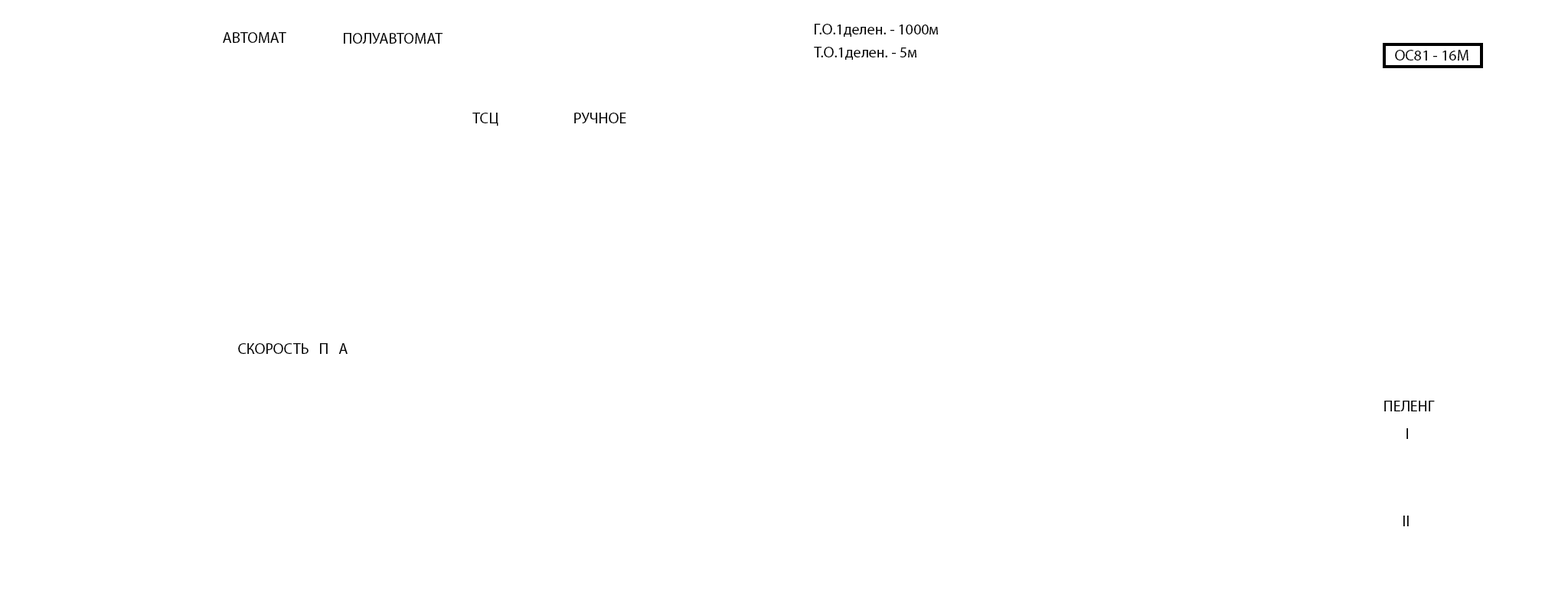
<style>
.page{position:relative;width:1568px;height:596px;background:#ffffff}
.page>*{position:absolute;margin:0}
.t1{font:15.3px "MyriadPro-Regular";color:#000000}
</style>
<div class="page">
<p class="t1" style="left:815px;top:24px;width:123px;height:13px">Г.О.1делен. - 1000м</p>
<p class="t1" style="left:223px;top:32px;width:63px;height:11px">АВТОМАТ</p>
<p class="t1" style="left:344px;top:33px;width:99px;height:11px">ПОЛУАВТОМАТ</p>
<p class="t1" style="left:814px;top:47px;width:102px;height:13px">Т.О.1делен. - 5м</p>
<p class="t1" style="left:1395px;top:50px;width:73px;height:10px">ОС81 - 16М</p>
<p class="t1" style="left:472px;top:113px;width:26px;height:13px">ТСЦ</p>
<p class="t1" style="left:574px;top:113px;width:52px;height:10px">РУЧНОЕ</p>
<p class="t1" style="left:238px;top:343px;width:110px;height:11px">СКОРОСТЬ   П   А</p>
<p class="t1" style="left:1384px;top:400px;width:51px;height:11px">ПЕЛЕНГ</p>
<p class="t1" style="left:1406px;top:428px;width:2px;height:11px">I</p>
<p class="t1" style="left:1403px;top:515px;width:6px;height:11px">II</p>
</div>
